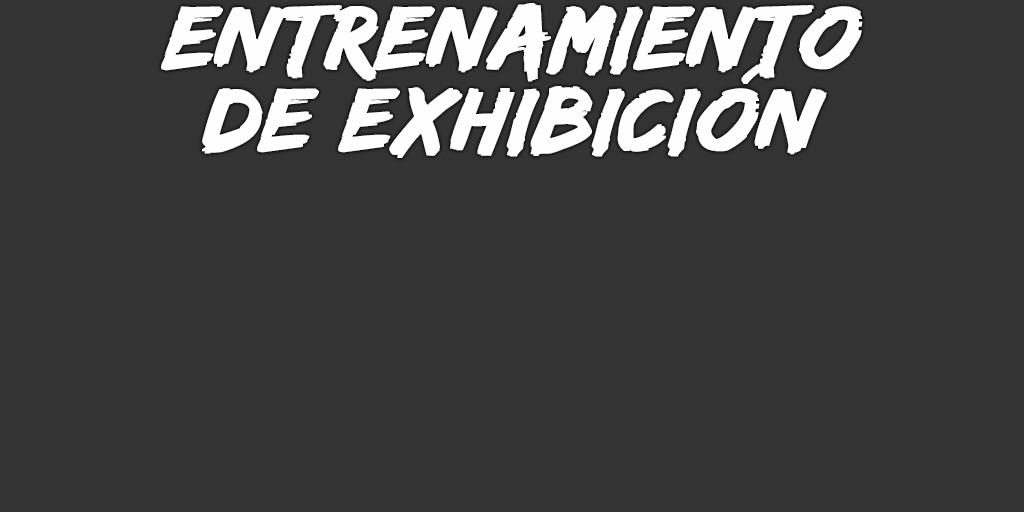
<style>
.page{position:relative;width:1024px;height:512px;background:#333333}
.page>*{position:absolute;margin:0}
.t1{font:93px/82px "EdoSZ";color:#fefefe;font-weight:bold;font-style:italic;scale:1.04 1}
</style>
<div class="page">
<p class="t1" style="left:161px;top:3px;width:702px;height:155px;text-align:center">entrenamiento<br>de exhibición</p>
</div>
